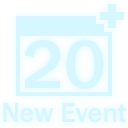
<style>
.page{position:relative;width:128px;height:128px;background:#d6f7ff}
.page>*{position:absolute;margin:0}
.t1{font:71.2px "FranklinGothic-Medium";color:#d6f7ff}
.t2{font:28px "FranklinGothic-Medium";color:#d6f7ff}
</style>
<div class="page">
<p class="t1" style="left:25px;top:39px;width:79px;height:50px">20</p>
<p class="t1" style="left:25px;top:39px;width:79px;height:50px">20</p>
<p class="t2" style="left:3px;top:103px;width:123px;height:20px">New Event</p>
<p class="t2" style="left:3px;top:103px;width:123px;height:20px">New Event</p>
</div>
